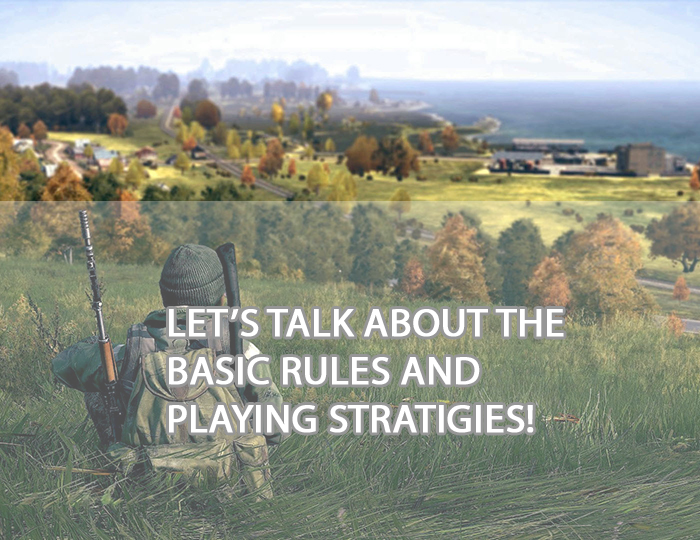
<style>
.page{position:relative;width:700px;height:540px}
.page>*{position:absolute;margin:0}
.t1{font:40px "MyriadPro-Regular";color:#ffffff;font-weight:bold}
</style>
<div class="page">
<p class="t1" style="left:169px;top:309px;width:395px;height:124px">LET’S TALK ABOUT THE <br>BASIC RULES AND <br>PLAYING STRATIGIES!</p>
</div>
